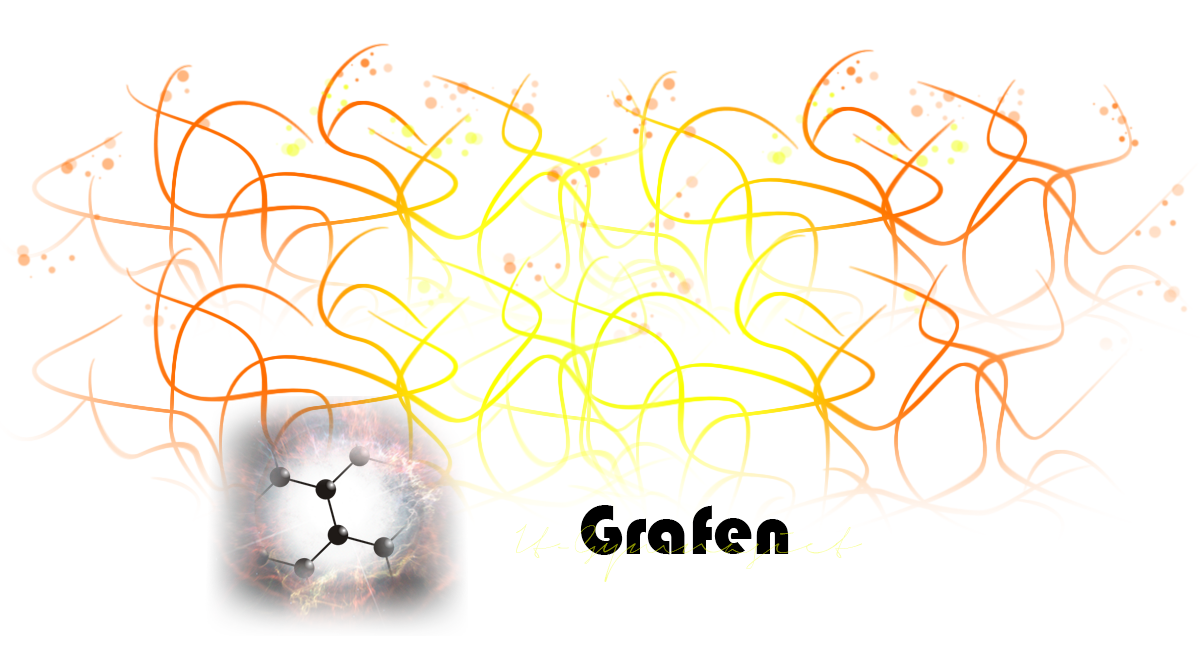
<style>
.page{position:relative;width:1200px;height:650px;background:#ffffff}
.page>*{position:absolute;margin:0}
.t1{font:72px "Bauhaus93";color:#000000}
</style>
<div class="page">
<p class="t1" style="left:580px;top:505px;width:209px;height:50px">Grafen</p>
</div>
